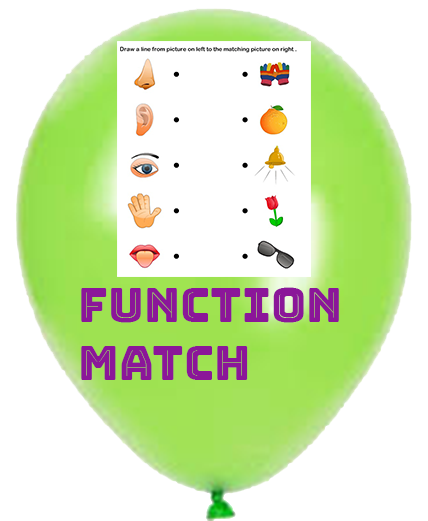
<style>
.page{position:relative;width:428px;height:521px;background:#ffffff}
.page>*{position:absolute;margin:0}
.t1{font:48px "BungeeInline-Regular";color:#8b1699}
</style>
<div class="page">
<p class="t1" style="left:81px;top:287px;width:258px;height:93px">function<br>Match</p>
</div>
